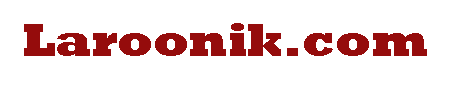
<style>
.page{position:relative;width:450px;height:100px;background:#ffffff}
.page>*{position:absolute;margin:0}
.t1{font:48px "Rockwell-ExtraBold";color:#950c0c}
</style>
<div class="page">
<p class="t1" style="left:24px;top:23px;width:403px;height:33px">Laroonik.com</p>
</div>
